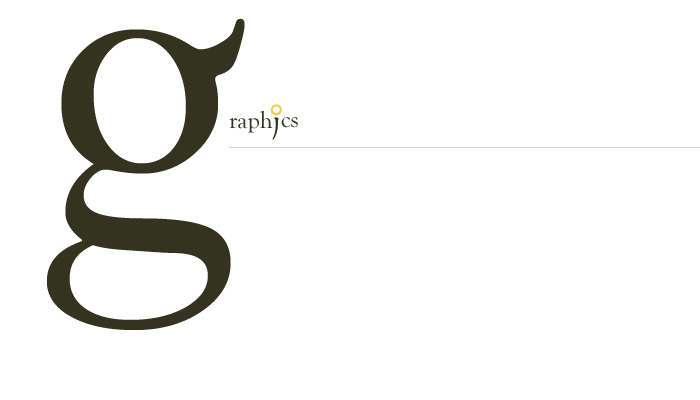
<style>
.page{position:relative;width:700px;height:400px;background:#ffffff}
.page>*{position:absolute;margin:0}
.t1{font:500px "GoudyOldStyleT-Regular";color:#34331f}
.t2{font:24px "GoudyOldStyleT-Regular";color:#34331f}
.t3{font:38px "Katakana";color:#34331f}
</style>
<div class="page">
<p class="t1" style="left:46px;top:18px;width:199px;height:312px">g</p>
<p class="t2" style="left:229px;top:110px;width:44px;height:23px">raph</p>
<p class="t3" style="left:272px;top:117px;width:7px;height:23px;rotate:-31deg">b</p>
<p class="t2" style="left:281px;top:117px;width:17px;height:11px">cs</p>
</div>
